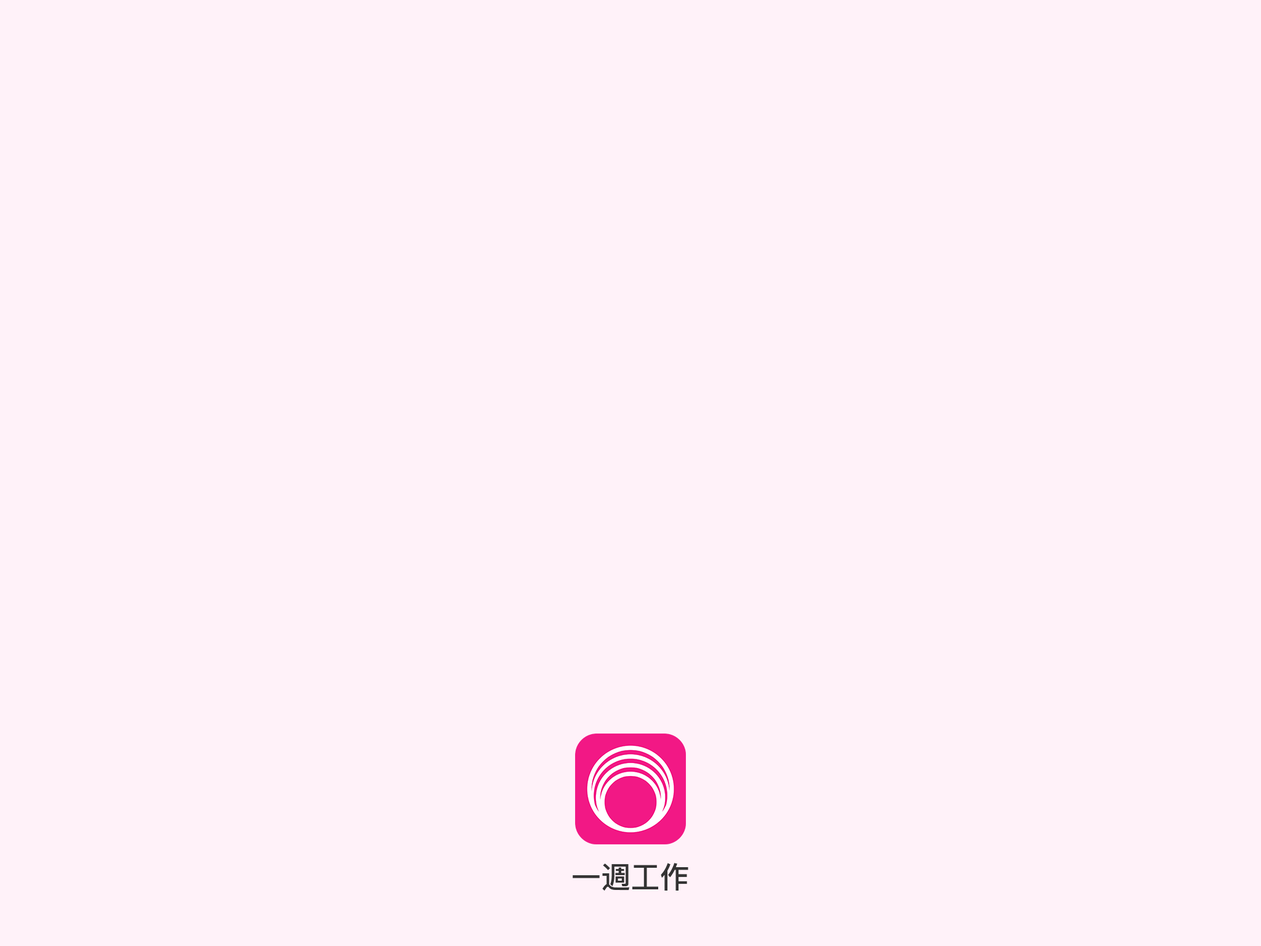
<style>
.page{position:relative;width:1261px;height:946px;background:#fff2f9}
.page>*{position:absolute;margin:0}
.t1{font:29.6px "PingFang-SC-Bold";color:#333333}
</style>
<div class="page">
<p class="t1" style="left:573px;top:863px;width:115px;height:27px">一週工作</p>
</div>
